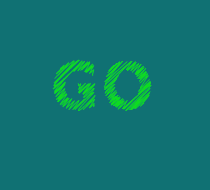
<style>
.page{position:relative;width:210px;height:190px;background:#107173}
.page>*{position:absolute;margin:0}
.t1{font:60px "Crosshatcher";letter-spacing:0.05em;color:#0fdb22}
</style>
<div class="page">
<p class="t1" style="left:52px;top:59px;width:100px;height:52px">GO</p>
</div>
